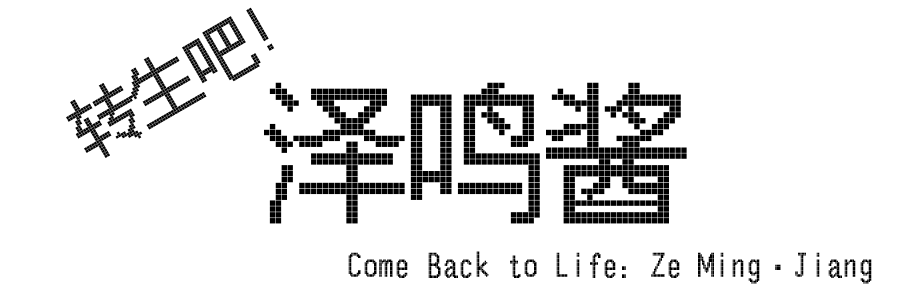
<style>
.page{position:relative;width:900px;height:300px;background:#ffffff}
.page>*{position:absolute;margin:0}
.t1{font:66.4px "FZXS24--GB1-0";color:#000000}
.t2{font:141.2px "FZXS24--GB1-0";color:#000000}
.t3{font:32px "FZXS24--GB1-0";color:#000000}
</style>
<div class="page">
<p class="t1" style="left:66px;top:7px;width:209px;height:151px;rotate:-30deg">转生吧！</p>
<p class="t2" style="left:264px;top:82px;width:423px;height:142px">泽鸣酱</p>
<p class="t3" style="left:348px;top:251px;width:524px;height:33px">Come Back to Life: Ze Ming·Jiang</p>
</div>
